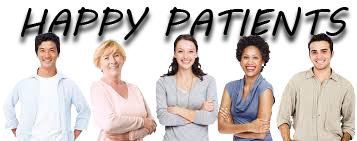
<style>
.page{position:relative;width:357px;height:141px;background:#ffffff}
.page>*{position:absolute;margin:0}
.t1{font:37.1px "MVBoli";color:#000000}
</style>
<div class="page">
<p class="t1" style="left:21px;top:7px;width:328px;height:33px">HAPPY PATIENTS</p>
</div>
